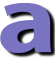
<style>
.page{position:relative;width:55px;height:58px;background:#7973c2}
.page>*{position:absolute;margin:0}
.t1{font:100px "Myriad-Bold";color:#7973c2;scale:1.14 1}
</style>
<div class="page">
<p class="t1" style="left:0px;top:3px;width:51px;height:50px">a</p>
</div>
